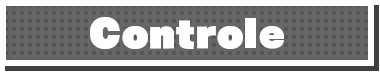
<style>
.page{position:relative;width:380px;height:72px;background:#676767}
.page>*{position:absolute;margin:0}
.t1{font:36px "RaglanPunchStd-UB";letter-spacing:0.027em;color:#ffffff}
</style>
<div class="page">
<p class="t1" style="left:90px;top:17px;width:194px;height:32px">Controle</p>
</div>
